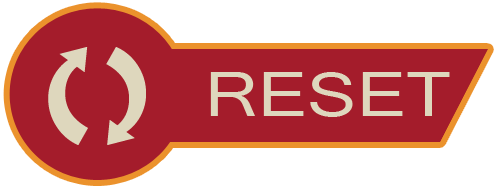
<style>
.page{position:relative;width:495px;height:190px;background:#a41c2b}
.page>*{position:absolute;margin:0}
.t1{font:66.8px "Shruti";color:#ded7bd;scale:1.19 1}
</style>
<div class="page">
<p class="t1" style="left:210px;top:72px;width:240px;height:45px">RESET</p>
</div>
